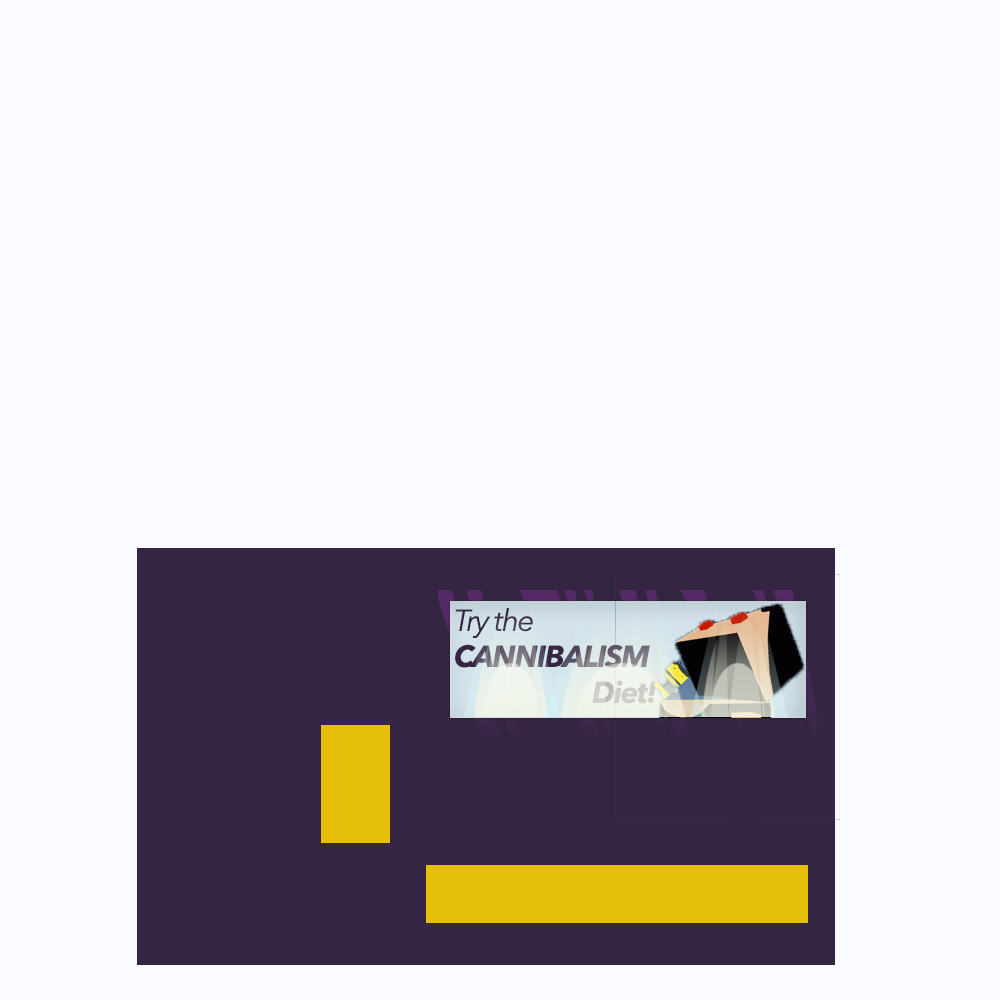
<style>
.page{position:relative;width:1000px;height:1000px;background:#fafbff}
.page>*{position:absolute;margin:0}
.t1{font:30px "AvenirNext-BoldItalic";letter-spacing:-0.05em}
.t2{font:30px "AvenirNext-Italic";letter-spacing:-0.05em}
</style>
<div class="page">
<p class="t1" style="left:455px;top:608px;width:202px;height:96px"><span class="t2">Try the<br></span>CANNIBALISM<br>           Diet!</p>
</div>
